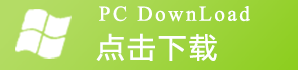
<style>
.page{position:relative;width:298px;height:70px}
.page>*{position:absolute;margin:0}
.t1{font:25.9px "Aparajita";letter-spacing:0.075em;color:#ffffff;font-weight:bold}
.t2{font:28px "MicrosoftYaHei";letter-spacing:0.075em;color:#ffffff;font-weight:bold}
</style>
<div class="page">
<p class="t1" style="left:99px;top:6px;width:151px;height:16px">PC DownLoad</p>
<p class="t2" style="left:96px;top:33px;width:121px;height:28px">点击下载</p>
</div>
